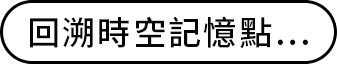
<style>
.page{position:relative;width:337px;height:64px;background:#ffffff}
.page>*{position:absolute;margin:0}
.t1{font:33.3px "NotoSansCJKtc-Medium";letter-spacing:0.06em;color:#060606}
</style>
<div class="page">
<p class="t1" style="left:29px;top:16px;width:279px;height:33px">回溯時空記憶點…</p>
</div>
